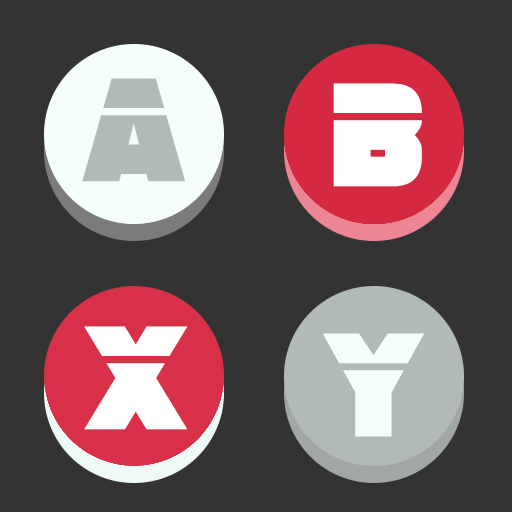
<style>
.page{position:relative;width:512px;height:512px;background:#333333}
.page>*{position:absolute;margin:0}
.t1{font:150px "Retronoid";color:#b1bab9}
.t2{font:150px "Retronoid";color:#ffffff}
.t3{font:150px "Retronoid";color:#f5fefd}
</style>
<div class="page">
<p class="t1" style="left:82px;top:78px;width:104px;height:104px">A</p>
<p class="t2" style="left:333px;top:83px;width:89px;height:104px">B</p>
<p class="t2" style="left:84px;top:326px;width:104px;height:104px">X</p>
<p class="t3" style="left:322px;top:333px;width:102px;height:104px">Y</p>
</div>
